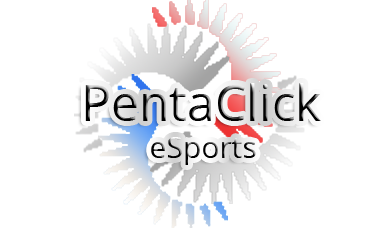
<style>
.page{position:relative;width:380px;height:228px;background:#ffffff}
.page>*{position:absolute;margin:0}
.t1{font:50px "OpenSans"}
.t2{font:30px "OpenSans"}
</style>
<div class="page">
<p class="t1" style="left:85px;top:83px;width:236px;height:38px">PentaClick</p>
<p class="t2" style="left:151px;top:137px;width:105px;height:28px">eSports</p>
</div>
